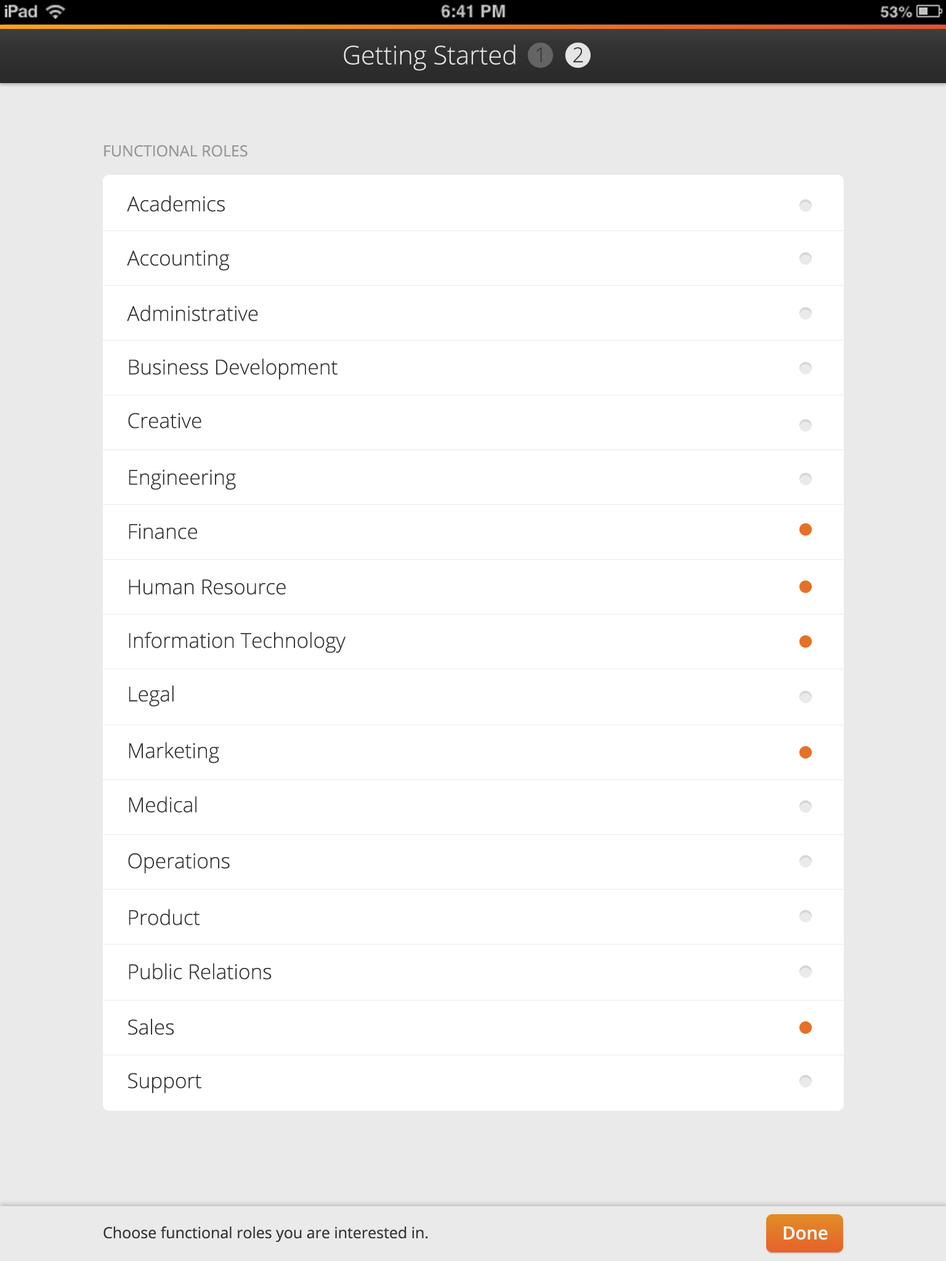
<style>
.page{position:relative;width:946px;height:1261px;background:#ffffff}
.page>*{position:absolute;margin:0}
.t1{font:25.7px "OpenSans-Light";color:#e5e5e5}
.t2{font:20.5px "OpenSans-Light";color:#343434}
.t3{font:15.4px "OpenSans";color:#969696}
.t4{font:15.4px "OpenSans";color:#343434}
.t5{font:18px "OpenSans-Semibold";color:#ffffff}
</style>
<div class="page">
<p class="t1" style="left:344px;top:44px;width:171px;height:27px">Getting Started</p>
<p class="t2" style="left:536px;top:47px;width:6px;height:16px">1</p>
<p class="t2" style="left:573px;top:47px;width:10px;height:16px">2</p>
<p class="t3" style="left:104px;top:145px;width:144px;height:12px">FUNCTIONAL ROLES</p>
<p class="t2" style="left:127px;top:195px;width:98px;height:17px">Academics</p>
<p class="t2" style="left:127px;top:250px;width:103px;height:21px">Accounting</p>
<p class="t2" style="left:127px;top:305px;width:131px;height:16px">Administrative</p>
<p class="t2" style="left:129px;top:358px;width:208px;height:22px">Business Development</p>
<p class="t2" style="left:128px;top:413px;width:73px;height:16px">Creative</p>
<p class="t2" style="left:129px;top:469px;width:107px;height:21px">Engineering</p>
<p class="t2" style="left:129px;top:523px;width:68px;height:16px">Finance</p>
<p class="t2" style="left:129px;top:579px;width:157px;height:16px">Human Resource</p>
<p class="t2" style="left:129px;top:632px;width:216px;height:21px">Information Technology</p>
<p class="t2" style="left:129px;top:685px;width:45px;height:22px">Legal</p>
<p class="t2" style="left:129px;top:742px;width:90px;height:21px">Marketing</p>
<p class="t2" style="left:129px;top:796px;width:67px;height:17px">Medical</p>
<p class="t2" style="left:128px;top:853px;width:102px;height:21px">Operations</p>
<p class="t2" style="left:129px;top:909px;width:71px;height:16px">Product</p>
<p class="t2" style="left:129px;top:963px;width:143px;height:17px">Public Relations</p>
<p class="t2" style="left:128px;top:1018px;width:46px;height:17px">Sales</p>
<p class="t2" style="left:128px;top:1073px;width:73px;height:20px">Support</p>
<p class="t4" style="left:103px;top:1226px;width:325px;height:16px">Choose functional roles you are interested in.</p>
<p class="t5" style="left:783px;top:1226px;width:44px;height:14px">Done</p>
</div>
